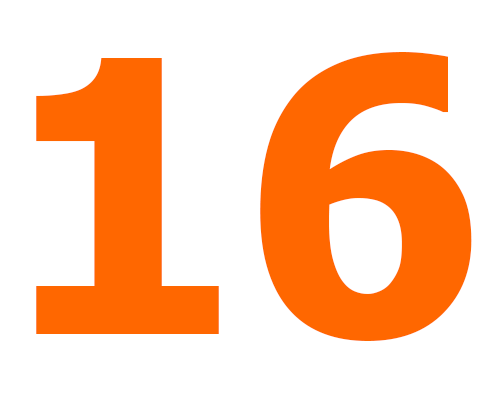
<style>
.page{position:relative;width:500px;height:400px;background:#ffffff}
.page>*{position:absolute;margin:0}
.t1{font:380px "Tahoma-Bold";color:#ff6700}
</style>
<div class="page">
<p class="t1" style="left:36px;top:52px;width:436px;height:289px">16</p>
</div>
